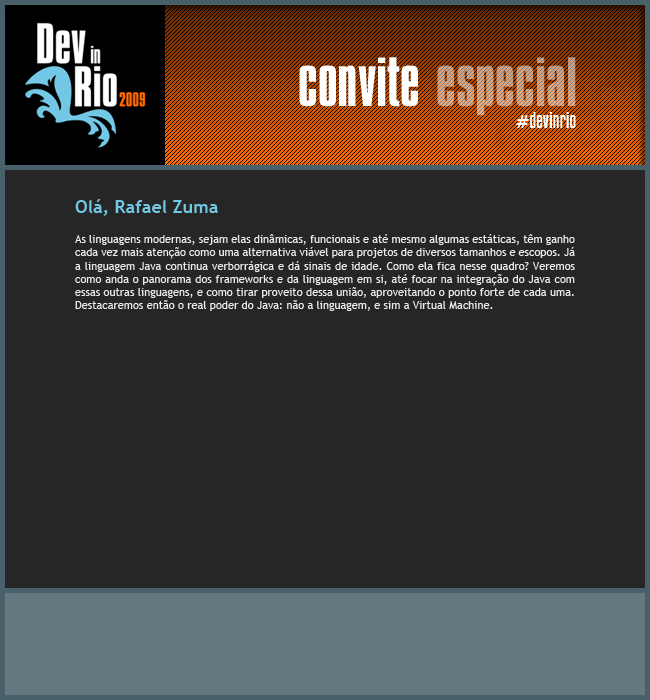
<style>
.page{position:relative;width:650px;height:700px;background:#262626}
.page>*{position:absolute;margin:0}
.t1{font:60px "CompactaBT-Roman";color:#ffffff}
.t2{font:60px "CompactaBT-Roman";color:#d4a280}
.t3{font:20px "CompactaBT-Roman";color:#ffffff}
.t4{font:18px "CompactaBT-Roman";color:#ffffff}
.t5{font:18px "TrebuchetMS-Bold";color:#71c7e4}
.t6{font:11px "TrebuchetMS";color:#ffffff}
</style>
<div class="page">
<p class="t1" style="left:299px;top:57px;width:119px;height:50px">convite</p>
<p class="t2" style="left:437px;top:57px;width:139px;height:59px">especial</p>
<p class="t3" style="left:516px;top:112px;width:60px;height:16px"><span class="t4">#</span>devinrio</p>
<p class="t5" style="left:75px;top:199px;width:143px;height:17px">Olá, Rafael Zuma</p>
<p class="t6" style="left:75px;top:234px;width:500px;height:77px;text-align:justify;opacity:0.9">As linguagens modernas, sejam elas dinâmicas, funcionais e até mesmo algumas estáticas, têm ganho cada vez mais atenção como uma alternativa viável para projetos de diversos tamanhos e escopos. Já a linguagem Java continua verborrágica e dá sinais de idade. Como ela fica nesse quadro? Veremos como anda o panorama dos frameworks e da linguagem em si, até focar na integração do Java com essas outras linguagens, e como tirar proveito dessa união, aproveitando o ponto forte de cada uma. Destacaremos então o real poder do Java: não a linguagem, e sim a Virtual Machine.</p>
</div>
